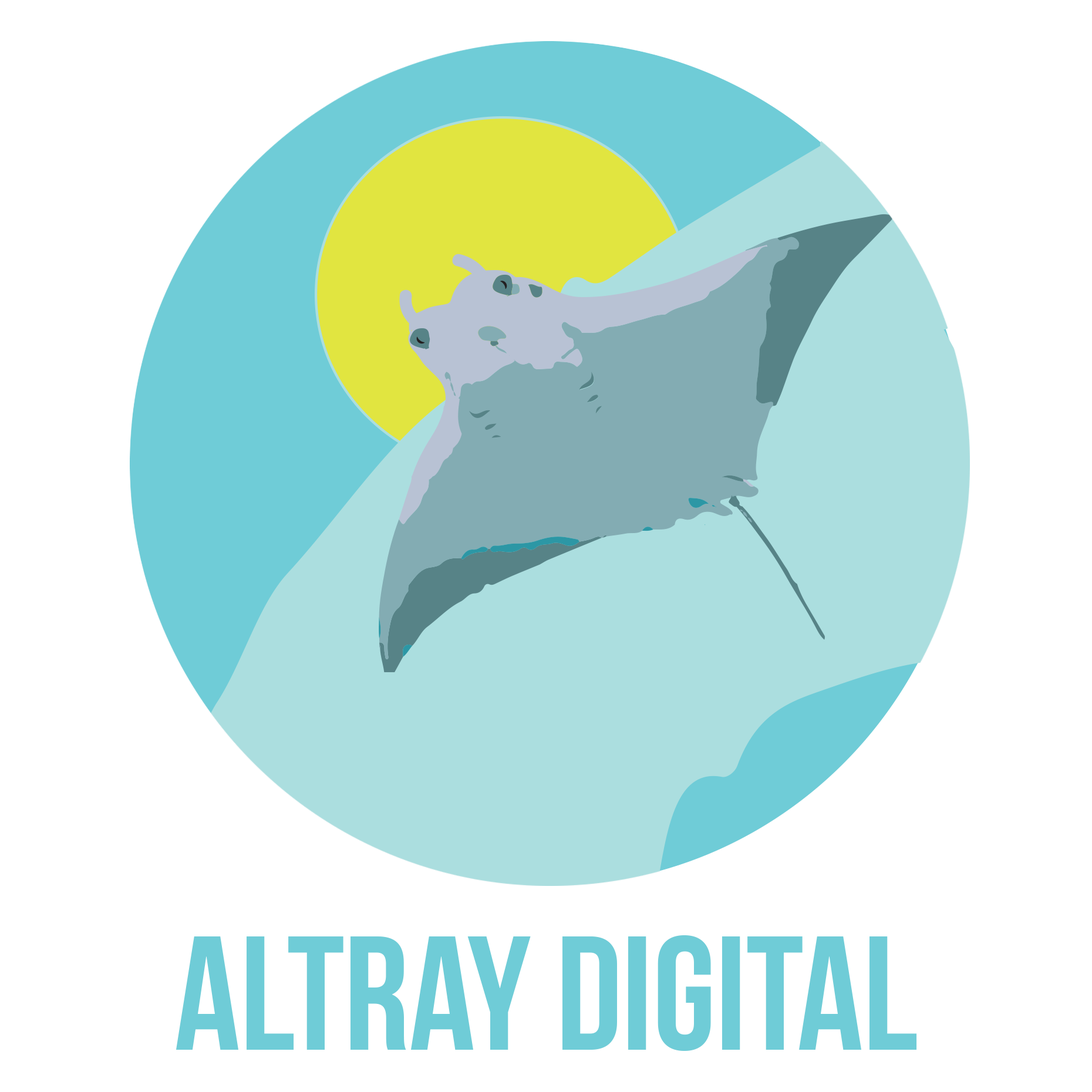
<style>
.page{position:relative;width:1092px;height:1092px;background:#ffffff}
.page>*{position:absolute;margin:0}
.t1{font:161.5px "BebasNeue";color:#6fccd7}
</style>
<div class="page">
<p class="t1" style="left:176px;top:935px;width:741px;height:116px">ALTRAY DIGITAL</p>
</div>
